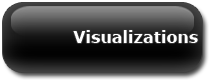
<style>
.page{position:relative;width:209px;height:81px}
.page>*{position:absolute;margin:0}
.t1{font:16px "Verdana-Bold";color:#ffffff}
</style>
<div class="page">
<p class="t1" style="left:73px;top:30px;width:125px;height:13px">Visualizations</p>
</div>
